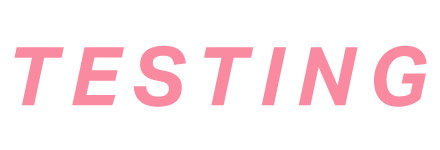
<style>
.page{position:relative;width:440px;height:150px;background:#ffffff}
.page>*{position:absolute;margin:0}
.t1{font:81.3px "AktivGrotesk-BoldItalic";letter-spacing:0.16em;color:#f98a9f}
</style>
<div class="page">
<p class="t1" style="left:14px;top:45px;width:413px;height:62px">TESTING</p>
</div>
